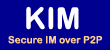
<style>
.page{position:relative;width:110px;height:50px;background:#000090}
.page>*{position:absolute;margin:0}
.t1{font:30px "ArialRoundedMTBold";color:#ffffff}
.t2{font:10px "ArialRoundedMTBold";color:#ffcc90}
</style>
<div class="page">
<p class="t1" style="left:26px;top:6px;width:53px;height:24px">KIM</p>
<p class="t2" style="left:8px;top:35px;width:95px;height:9px">Secure IM over P2P</p>
</div>
